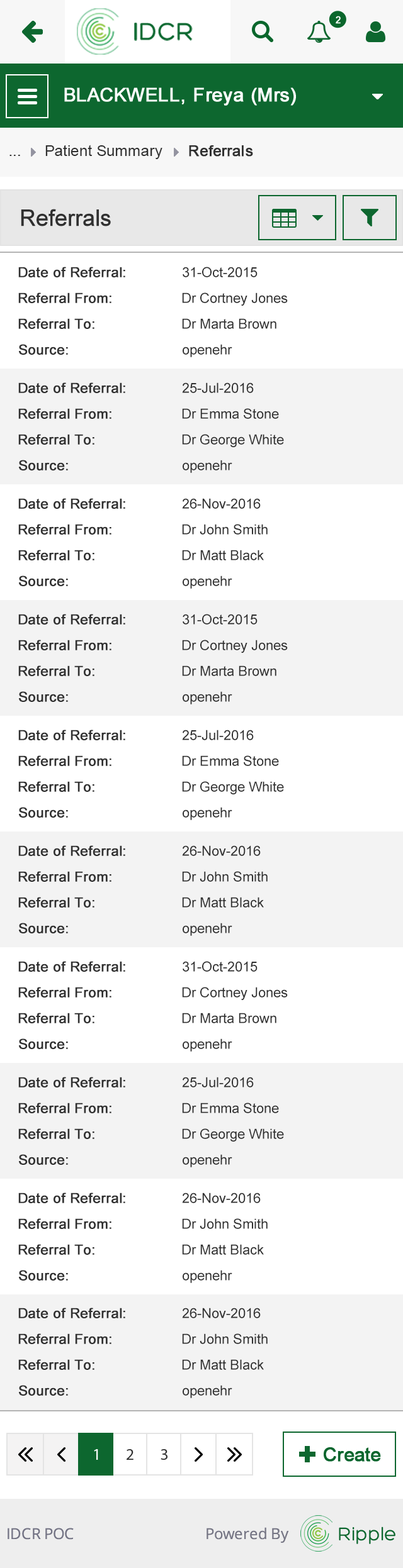
<style>
.page{position:relative;width:403px;height:1568px;background:#ffffff}
.page>*{position:absolute;margin:0}
.t1{font:15.1px "ArialMT";color:#313131}
.t2{font:15.1px "ArialMT";color:#313131;font-weight:bold}
.t3{font:22.6px "ArialMT";color:#303030;font-weight:bold}
.t4{font:13.8px "ArialMT";color:#303030;font-weight:bold}
.t5{font:13.8px "ArialMT";color:#303030}
</style>
<div class="page">
<p class="t1" style="left:45px;top:145px;width:117px;height:14px">Patient Summary</p>
<p class="t2" style="left:189px;top:145px;width:64px;height:12px">Referrals</p>
<p class="t1" style="left:9px;top:155px;width:11px;height:1px">...</p>
<p class="t3" style="left:21px;top:209px;width:90px;height:17px">Referrals</p>
<p class="t4" style="left:18px;top:267px;width:107px;height:10px">Date of Referral:</p>
<p class="t5" style="left:182px;top:267px;width:75px;height:10px">31-Oct-2015</p>
<p class="t4" style="left:18px;top:292px;width:93px;height:11px">Referral From:</p>
<p class="t5" style="left:182px;top:292px;width:105px;height:14px">Dr Cortney Jones</p>
<p class="t4" style="left:18px;top:318px;width:76px;height:11px">Referral To:</p>
<p class="t5" style="left:182px;top:318px;width:94px;height:11px">Dr Marta Brown</p>
<p class="t4" style="left:19px;top:344px;width:49px;height:11px">Source:</p>
<p class="t5" style="left:182px;top:344px;width:50px;height:13px">openehr</p>
<p class="t4" style="left:18px;top:382px;width:107px;height:11px">Date of Referral:</p>
<p class="t5" style="left:182px;top:382px;width:71px;height:11px">25-Jul-2016</p>
<p class="t4" style="left:18px;top:408px;width:93px;height:11px">Referral From:</p>
<p class="t5" style="left:182px;top:408px;width:97px;height:11px">Dr Emma Stone</p>
<p class="t4" style="left:18px;top:434px;width:76px;height:11px">Referral To:</p>
<p class="t5" style="left:182px;top:434px;width:102px;height:13px">Dr George White</p>
<p class="t4" style="left:19px;top:460px;width:49px;height:10px">Source:</p>
<p class="t5" style="left:182px;top:460px;width:50px;height:13px">openehr</p>
<p class="t4" style="left:18px;top:498px;width:107px;height:11px">Date of Referral:</p>
<p class="t5" style="left:182px;top:498px;width:78px;height:11px">26-Nov-2016</p>
<p class="t4" style="left:18px;top:524px;width:93px;height:11px">Referral From:</p>
<p class="t5" style="left:182px;top:524px;width:85px;height:11px">Dr John Smith</p>
<p class="t4" style="left:18px;top:550px;width:76px;height:10px">Referral To:</p>
<p class="t5" style="left:182px;top:550px;width:82px;height:10px">Dr Matt Black</p>
<p class="t4" style="left:19px;top:575px;width:49px;height:11px">Source:</p>
<p class="t5" style="left:182px;top:575px;width:50px;height:14px">openehr</p>
<p class="t4" style="left:18px;top:614px;width:107px;height:11px">Date of Referral:</p>
<p class="t5" style="left:182px;top:614px;width:75px;height:11px">31-Oct-2015</p>
<p class="t4" style="left:18px;top:640px;width:93px;height:10px">Referral From:</p>
<p class="t5" style="left:182px;top:640px;width:105px;height:13px">Dr Cortney Jones</p>
<p class="t4" style="left:18px;top:665px;width:76px;height:11px">Referral To:</p>
<p class="t5" style="left:182px;top:665px;width:94px;height:11px">Dr Marta Brown</p>
<p class="t4" style="left:19px;top:691px;width:49px;height:11px">Source:</p>
<p class="t5" style="left:182px;top:691px;width:50px;height:13px">openehr</p>
<p class="t4" style="left:18px;top:730px;width:107px;height:10px">Date of Referral:</p>
<p class="t5" style="left:182px;top:730px;width:71px;height:10px">25-Jul-2016</p>
<p class="t4" style="left:18px;top:755px;width:93px;height:11px">Referral From:</p>
<p class="t5" style="left:182px;top:755px;width:97px;height:11px">Dr Emma Stone</p>
<p class="t4" style="left:18px;top:781px;width:76px;height:11px">Referral To:</p>
<p class="t5" style="left:182px;top:781px;width:102px;height:13px">Dr George White</p>
<p class="t4" style="left:19px;top:807px;width:49px;height:11px">Source:</p>
<p class="t5" style="left:182px;top:807px;width:50px;height:13px">openehr</p>
<p class="t4" style="left:18px;top:845px;width:107px;height:11px">Date of Referral:</p>
<p class="t5" style="left:182px;top:845px;width:78px;height:11px">26-Nov-2016</p>
<p class="t4" style="left:18px;top:871px;width:93px;height:11px">Referral From:</p>
<p class="t5" style="left:182px;top:871px;width:85px;height:11px">Dr John Smith</p>
<p class="t4" style="left:18px;top:897px;width:76px;height:11px">Referral To:</p>
<p class="t5" style="left:182px;top:897px;width:82px;height:11px">Dr Matt Black</p>
<p class="t4" style="left:19px;top:923px;width:49px;height:10px">Source:</p>
<p class="t5" style="left:182px;top:923px;width:50px;height:13px">openehr</p>
<p class="t4" style="left:18px;top:961px;width:107px;height:11px">Date of Referral:</p>
<p class="t5" style="left:182px;top:961px;width:75px;height:11px">31-Oct-2015</p>
<p class="t4" style="left:18px;top:987px;width:93px;height:11px">Referral From:</p>
<p class="t5" style="left:182px;top:987px;width:105px;height:13px">Dr Cortney Jones</p>
<p class="t4" style="left:18px;top:1013px;width:76px;height:10px">Referral To:</p>
<p class="t5" style="left:182px;top:1013px;width:94px;height:10px">Dr Marta Brown</p>
<p class="t4" style="left:19px;top:1038px;width:49px;height:11px">Source:</p>
<p class="t5" style="left:182px;top:1038px;width:50px;height:14px">openehr</p>
<p class="t4" style="left:18px;top:1077px;width:107px;height:10px">Date of Referral:</p>
<p class="t5" style="left:182px;top:1077px;width:71px;height:10px">25-Jul-2016</p>
<p class="t4" style="left:18px;top:1103px;width:93px;height:10px">Referral From:</p>
<p class="t5" style="left:182px;top:1103px;width:97px;height:10px">Dr Emma Stone</p>
<p class="t4" style="left:18px;top:1128px;width:76px;height:11px">Referral To:</p>
<p class="t5" style="left:182px;top:1128px;width:102px;height:14px">Dr George White</p>
<p class="t4" style="left:19px;top:1154px;width:49px;height:11px">Source:</p>
<p class="t5" style="left:182px;top:1154px;width:50px;height:13px">openehr</p>
<p class="t4" style="left:18px;top:1193px;width:107px;height:10px">Date of Referral:</p>
<p class="t5" style="left:182px;top:1193px;width:78px;height:10px">26-Nov-2016</p>
<p class="t4" style="left:18px;top:1218px;width:93px;height:11px">Referral From:</p>
<p class="t5" style="left:182px;top:1218px;width:85px;height:11px">Dr John Smith</p>
<p class="t4" style="left:18px;top:1244px;width:76px;height:11px">Referral To:</p>
<p class="t5" style="left:182px;top:1244px;width:82px;height:11px">Dr Matt Black</p>
<p class="t4" style="left:19px;top:1270px;width:49px;height:11px">Source:</p>
<p class="t5" style="left:182px;top:1270px;width:50px;height:13px">openehr</p>
<p class="t4" style="left:18px;top:1308px;width:107px;height:10px">Date of Referral:</p>
<p class="t5" style="left:182px;top:1308px;width:78px;height:10px">26-Nov-2016</p>
<p class="t4" style="left:18px;top:1333px;width:93px;height:11px">Referral From:</p>
<p class="t5" style="left:182px;top:1333px;width:85px;height:11px">Dr John Smith</p>
<p class="t4" style="left:18px;top:1359px;width:76px;height:11px">Referral To:</p>
<p class="t5" style="left:182px;top:1359px;width:82px;height:11px">Dr Matt Black</p>
<p class="t4" style="left:19px;top:1385px;width:49px;height:11px">Source:</p>
<p class="t5" style="left:182px;top:1385px;width:50px;height:13px">openehr</p>
</div>
